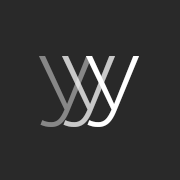
<style>
.page{position:relative;width:180px;height:180px;background:#292929}
.page>*{position:absolute;margin:0}
.t1{font:105.6px "Gotham-Light";color:#878787}
.t2{font:105.6px "Gotham-Light";color:#c8c8c8}
.t3{font:105.6px "Gotham-Light";color:#ffffff}
</style>
<div class="page">
<p class="t1" style="left:39px;top:56px;width:53px;height:71px">y</p>
<p class="t2" style="left:62px;top:56px;width:53px;height:71px">y</p>
<p class="t3" style="left:86px;top:56px;width:53px;height:71px">y</p>
</div>
